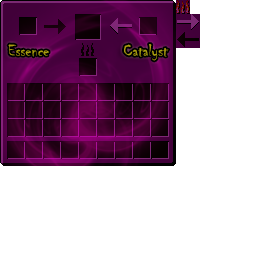
<style>
.page{position:relative;width:256px;height:256px;background:#ffffff}
.page>*{position:absolute;margin:0}
.t1{font:18px "Chiller-Regular";color:#aa9d10}
</style>
<div class="page">
<p class="t1" style="left:8px;top:44px;width:41px;height:13px">Essence</p>
<p class="t1" style="left:124px;top:44px;width:45px;height:17px">Catalyst</p>
</div>
